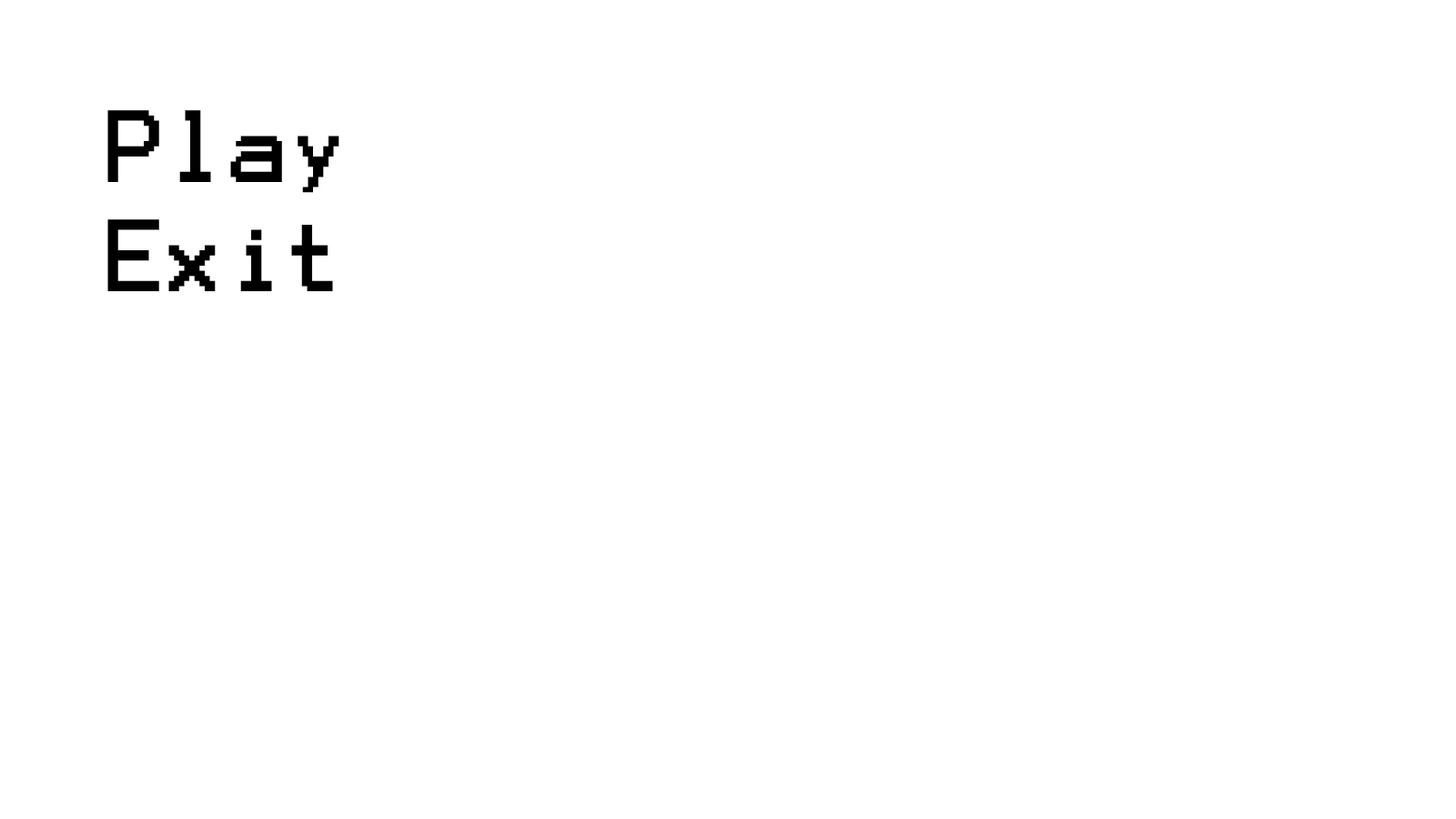
<style>
.page{position:relative;width:1456px;height:819px;background:#ffffff}
.page>*{position:absolute;margin:0}
.t1{font:81.9px "Terminal";color:#000000}
</style>
<div class="page">
<p class="t1" style="left:107px;top:110px;width:232px;height:83px">Play</p>
<p class="t1" style="left:107px;top:219px;width:226px;height:72px">Exit</p>
</div>
